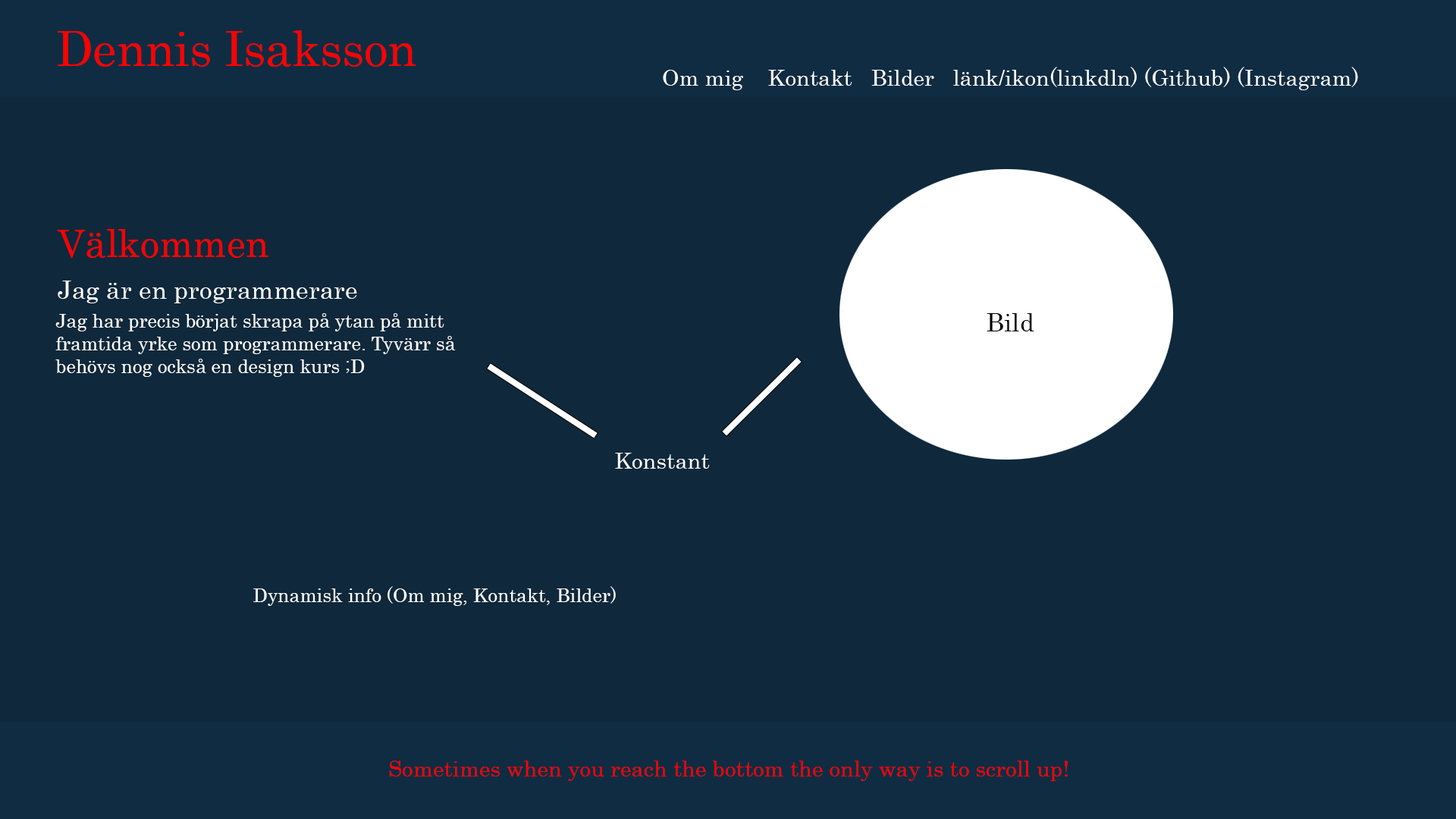
<style>
.page{position:relative;width:1456px;height:819px;background:#0f283b}
.page>*{position:absolute;margin:0}
.t1{font:47.4px "Century";color:#ff0000}
.t2{font:22.1px "Century";color:#ffffff}
.t3{font:37.9px "Century";color:#ff0000}
.t4{font:25.3px "Century";color:#ffffff}
.t5{font:19px "Century";color:#ffffff}
.t6{font:25.3px "Century";color:#000000}
.t7{font:22.1px "Century";color:#ff0000}
</style>
<div class="page">
<p class="t1" style="left:58px;top:30px;width:358px;height:37px">Dennis Isaksson</p>
<p class="t2" style="left:663px;top:67px;width:695px;height:23px">Om mig    Kontakt   Bilder   länk/ikon(linkdln) (Github) (Instagram)</p>
<p class="t3" style="left:57px;top:229px;width:211px;height:29px">Välkommen</p>
<p class="t4" style="left:58px;top:281px;width:299px;height:22px">Jag är en programmerare</p>
<p class="t5" style="left:55px;top:313px;width:401px;height:64px">Jag har precis börjat skrapa på ytan på mitt<br>framtida yrke som programmerare. Tyvärr så <br>behövs nog också en design kurs ;D</p>
<p class="t6" style="left:987px;top:313px;width:47px;height:18px">Bild</p>
<p class="t2" style="left:615px;top:453px;width:95px;height:16px">Konstant</p>
<p class="t5" style="left:253px;top:586px;width:363px;height:20px">Dynamisk info (Om mig, Kontakt, Bilder)</p>
<p class="t7" style="left:389px;top:761px;width:679px;height:20px">Sometimes when you reach the bottom the only way is to scroll up!</p>
</div>
